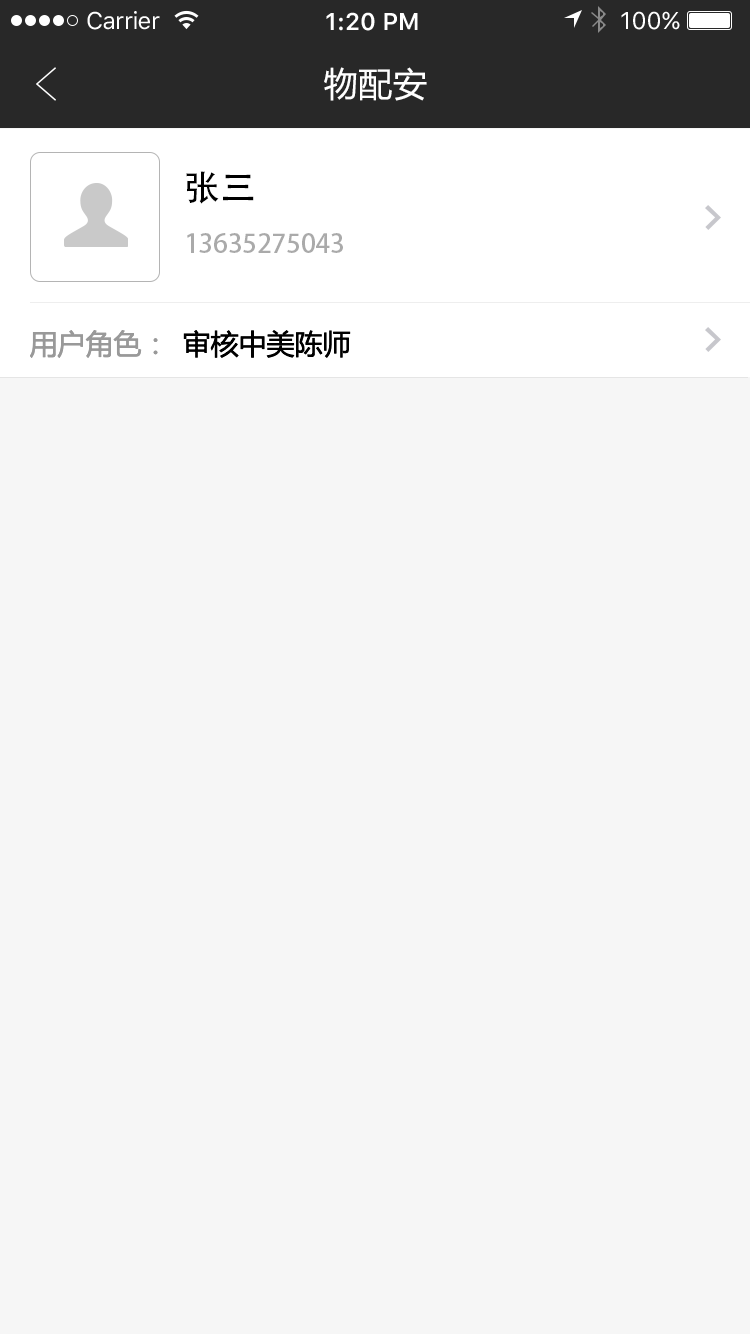
<style>
.page{position:relative;width:750px;height:1334px;background:#f6f6f6}
.page>*{position:absolute;margin:0}
.t1{font:24px "SFUIText-Regular";letter-spacing:-0.025em;color:#ffffff}
.t2{font:24px "SFUIText-Semibold";color:#ffffff}
.t3{font:24px "SFUIText-Regular";color:#ffffff}
.t4{font:34px "MicrosoftYaHei";letter-spacing:0.02em;color:#ffffff}
.t5{font:36px "AdobeHeitiStd-Regular";color:#000000}
.t6{font:26px "AdobeHeitiStd-Regular";color:#aaaaaa}
.t7{font:28px "MicrosoftYaHei";color:#999999}
.t8{font:28px "MicrosoftYaHei";color:#000000}
</style>
<div class="page">
<p class="t1" style="left:87px;top:11px;width:73px;height:19px">Carrier</p>
<p class="t2" style="left:326px;top:12px;width:92px;height:19px">1:20 PM</p>
<p class="t3" style="left:621px;top:11px;width:59px;height:19px">100%</p>
<p class="t4" style="left:324px;top:67px;width:103px;height:34px">物配安</p>
<p class="t5" style="left:186px;top:171px;width:68px;height:33px">张三</p>
<p class="t6" style="left:187px;top:233px;width:156px;height:20px">13635275043</p>
<p class="t7" style="left:30px;top:330px;width:128px;height:28px">用户角色：</p>
<p class="t8" style="left:183px;top:330px;width:168px;height:28px">审核中美陈师</p>
</div>
